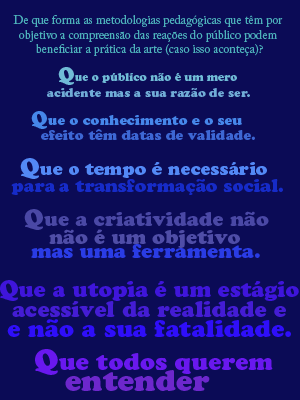
<style>
.page{position:relative;width:300px;height:400px;background:#0b0b56}
.page>*{position:absolute;margin:0}
.t1{font:12px "ACaslonPro-Regular";color:#4db2bb}
.t2{font:11px "CooperBlackStd";color:#70bbd6}
.t3{font:20px "CooperBlackStd";color:#70bbd6}
.t4{font:12px "CooperBlackStd";color:#70acd6}
.t5{font:14px "CooperBlackStd";color:#4687ea}
.t6{font:20px "CooperBlackStd";color:#4687ea}
.t7{font:14px "CooperBlackStd";color:#3d67d4}
.t8{font:18px "CooperBlackStd";color:#5389f6}
.t9{font:24px "CooperBlackStd";color:#5389f6}
.t10{font:18px "CooperBlackStd";color:#162bc8}
.t11{font:20px "CooperBlackStd";color:#4a48a5}
.t12{font:24px "CooperBlackStd";color:#4a48a5}
.t13{font:20px "CooperBlackStd";color:#4f4da7}
.t14{font:20px "CooperBlackStd";color:#2a3ce5}
.t15{font:22px "CooperBlackStd";color:#3f15db}
.t16{font:24px "CooperBlackStd";color:#3f15db}
.t17{font:22px "CooperBlackStd";color:#441cd4}
.t18{font:24px "CooperBlackStd";color:#2f0efa}
.t19{font:24px "CooperBlackStd";color:#6918ee}
.t20{font:30px "CooperBlackStd";color:#6918ee}
.t21{font:30px "CooperBlackStd";color:#6d27cc}
</style>
<div class="page">
<p class="t1" style="left:13px;top:15px;width:270px;height:41px;text-align:center">De que forma as metodologias pedagógicas que têm por <br>objetivo a compreensão das reações do público podem <br>beneficiar a prática da arte (caso isso aconteça)?</p>
<p class="t2" style="left:58px;top:67px;width:179px;height:18px"><span class="t3">Q</span>ue o público não é um mero</p>
<p class="t4" style="left:47px;top:88px;width:203px;height:10px">acidente mas a sua razão de ser.</p>
<p class="t5" style="left:31px;top:111px;width:211px;height:18px"><span class="t6">Q</span>ue o conhecimento e o seu</p>
<p class="t7" style="left:41px;top:129px;width:214px;height:11px">efeito têm datas de validade.</p>
<p class="t8" style="left:20px;top:158px;width:247px;height:21px"><span class="t9">Q</span>ue o tempo é necessário</p>
<p class="t10" style="left:11px;top:183px;width:44px;height:12px">para</p>
<p class="t10" style="left:59px;top:179px;width:224px;height:16px">a transformação social.</p>
<p class="t11" style="left:24px;top:209px;width:245px;height:21px"><span class="t12">Q</span>ue a criatividade não</p>
<p class="t13" style="left:49px;top:229px;width:191px;height:19px">não é um objetivo</p>
<p class="t14" style="left:31px;top:244px;width:229px;height:14px">mas uma ferramenta.</p>
<p class="t15" style="left:0px;top:280px;width:299px;height:21px"><span class="t16">Q</span>ue a utopia é um estágio</p>
<p class="t17" style="left:12px;top:301px;width:274px;height:16px">acessível da realidade e</p>
<p class="t18" style="left:7px;top:319px;width:284px;height:19px">e não a sua fatalidade.</p>
<p class="t19" style="left:35px;top:349px;width:238px;height:26px"><span class="t20">Q</span>ue todos querem</p>
<p class="t21" style="left:65px;top:370px;width:145px;height:21px">entender</p>
</div>
